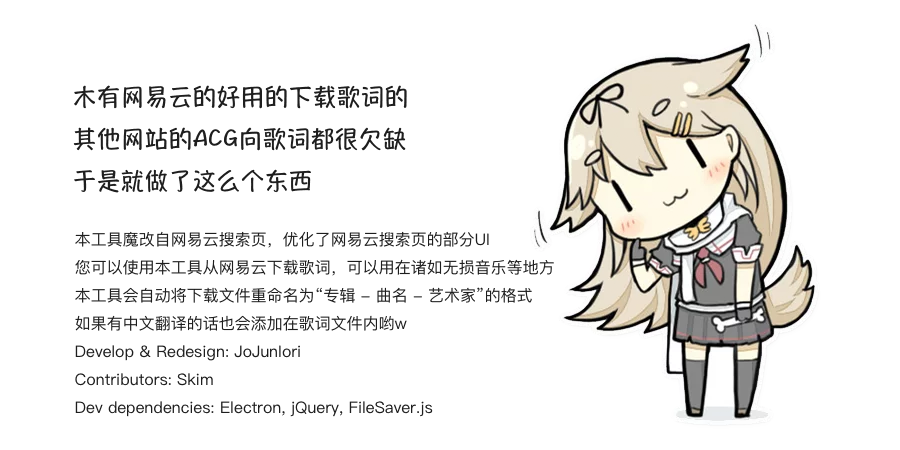
<style>
.page{position:relative;width:900px;height:450px;background:#ffffff}
.page>*{position:absolute;margin:0}
.t1{font:24px "HannotateSC-W7";color:#1e1e1e}
.t2{font:16px "PingFangSC-Regular";color:#1e1e1e}
</style>
<div class="page">
<p class="t1" style="left:73px;top:85px;width:334px;height:108px">木有网易云的好用的下载歌词的<br>其他网站的ACG向歌词都很欠缺<br>于是就做了这么个东西</p>
<p class="t2" style="left:75px;top:231px;width:479px;height:186px">本工具魔改自网易云搜索页，优化了网易云搜索页的部分UI<br>您可以使用本工具从网易云下载歌词，可以用在诸如无损音乐等地方<br>本工具会自动将下载文件重命名为“专辑 - 曲名 - 艺术家”的格式<br>如果有中文翻译的话也会添加在歌词文件内哟w<br>Develop &amp; Redesign: JoJunIori<br>Contributors: Skim<br>Dev dependencies: Electron, jQuery, FileSaver.js</p>
</div>
